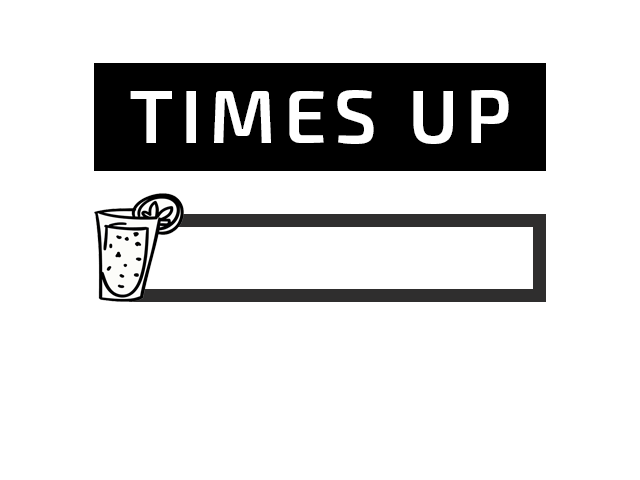
<style>
.page{position:relative;width:640px;height:480px;background:#ffffff}
.page>*{position:absolute;margin:0}
.t1{font:75px "Exo2-SemiBold";letter-spacing:0.1em;color:#ffffff}
</style>
<div class="page">
<p class="t1" style="left:130px;top:90px;width:379px;height:54px">TIMES UP</p>
</div>
